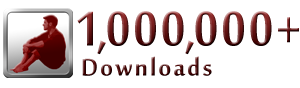
<style>
.page{position:relative;width:300px;height:88px;background:#ffffff}
.page>*{position:absolute;margin:0}
.t1{font:75px "MoolBoran";letter-spacing:0.05em;scale:0.92 1}
.t2{font:75px "MoolBoran";letter-spacing:0.1em;scale:0.92 1}
.t3{font:37px "MoolBoran";letter-spacing:0.05em}
</style>
<div class="page">
<p class="t1" style="left:77px;top:11px;width:16px;height:35px">1</p>
<p class="t1" style="left:107px;top:11px;width:77px;height:35px">000</p>
<p class="t1" style="left:195px;top:11px;width:104px;height:35px">000+</p>
<p class="t2" style="left:97px;top:40px;width:9px;height:15px">,</p>
<p class="t2" style="left:185px;top:40px;width:9px;height:15px">,</p>
<p class="t3" style="left:82px;top:56px;width:130px;height:20px">Downloads</p>
</div>
